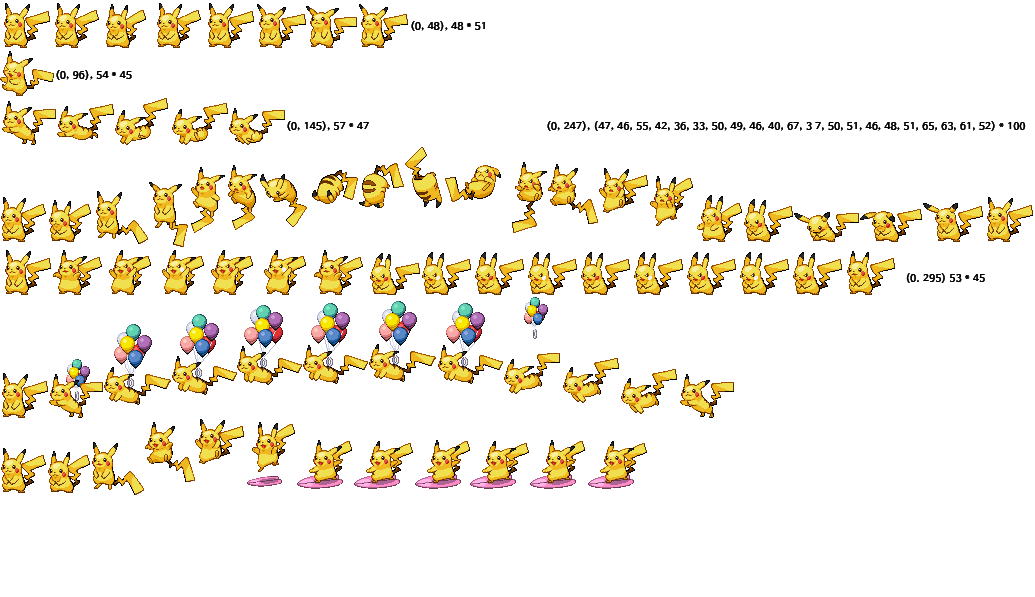
<style>
.page{position:relative;width:1035px;height:597px;background:#ffffff}
.page>*{position:absolute;margin:0}
.t1{font:10px "HancomGothicBold";letter-spacing:0.04em;color:#000000}
</style>
<div class="page">
<p class="t1" style="left:411px;top:21px;width:74px;height:10px">(0, 48), 48 * 51</p>
<p class="t1" style="left:56px;top:70px;width:76px;height:10px">(0, 96), 54 * 45</p>
<p class="t1" style="left:287px;top:121px;width:82px;height:10px">(0, 145), 57 * 47</p>
<p class="t1" style="left:547px;top:121px;width:479px;height:10px">(0, 247), (47, 46, 55, 42, 36, 33, 50, 49, 46, 40, 67, 3 7, 50, 51, 46, 48, 51, 65, 63, 61, 52) * 100</p>
<p class="t1" style="left:906px;top:273px;width:79px;height:10px">(0. 295) 53 * 45</p>
</div>
